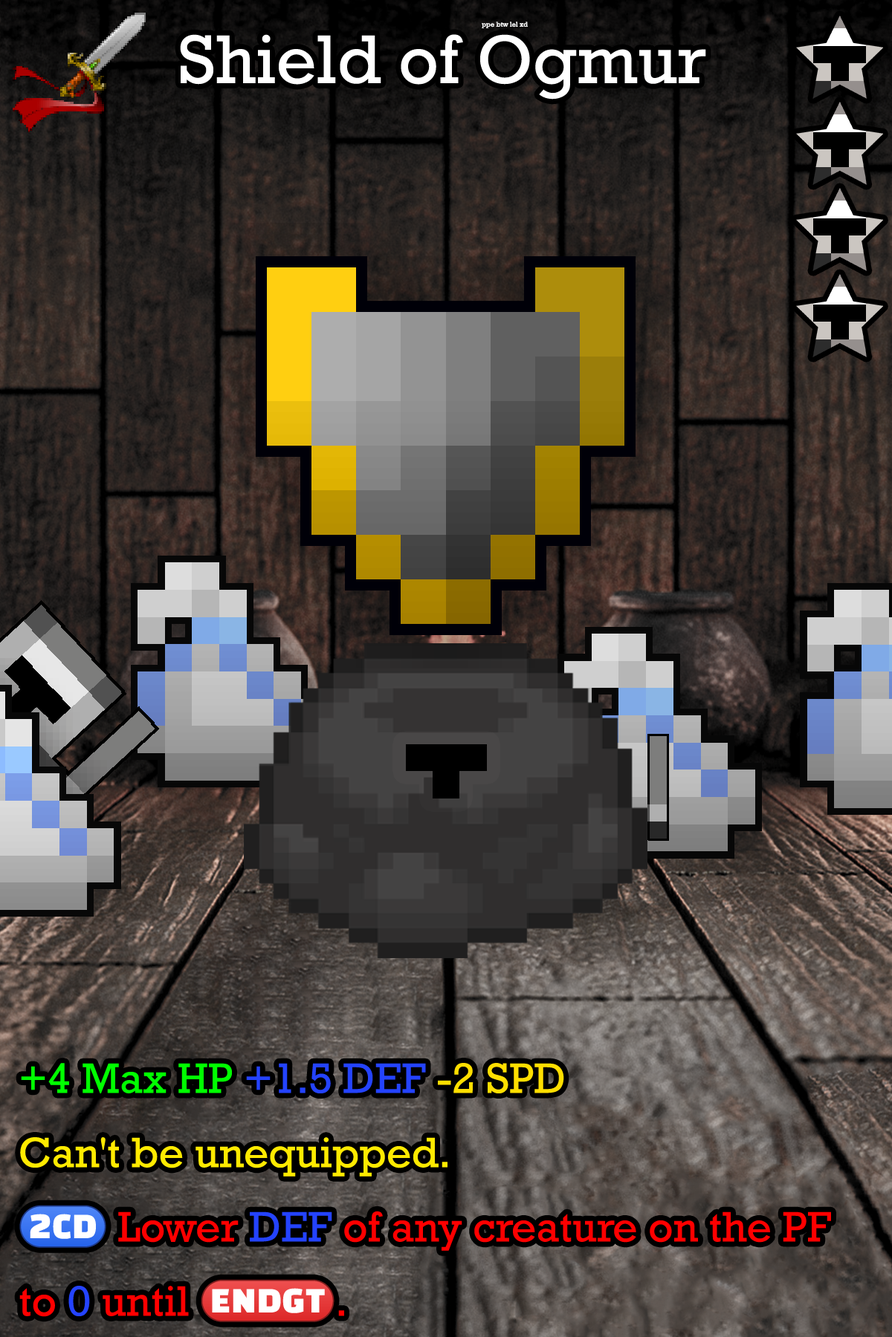
<style>
.page{position:relative;width:892px;height:1337px}
.page>*{position:absolute;margin:0}
.t1{font:11.9px "Rockwell";color:#ffffff}
.t2{font:120.4px "Rockwell";color:#ffffff}
.t3{font:74.3px/74.3px "Rockwell";color:#ff0000}
.t4{font:74.3px/74.3px "Rockwell";color:#00ff00}
.t5{font:74.3px/74.3px "Rockwell";color:#2443ff}
.t6{font:74.3px/74.3px "Rockwell";color:#ffde00}
.t7{font:74.3px/74.3px "Rockwell";color:#ffea00}
.t8{font:74.3px/74.3px "stoogedings-Regular";color:#ff0000}
</style>
<div class="page">
<p class="t1" style="left:481px;top:22px;width:47px;height:6px">ppe btw lel xd</p>
<p class="t2" style="left:180px;top:34px;width:526px;height:66px">Shield of Ogmur</p>
<p class="t3" style="left:19px;top:1063px;width:812px;height:260px"><span class="t4">+4 Max HP </span><span class="t5">+1.5 DEF </span><span class="t6">-2 SPD<br></span><span class="t7">Can't be unequipped.<br></span><span class="t8">(2CD)</span> Lower <span class="t5">DEF</span> of any creature on the PF to <span class="t5">0</span> until <span class="t8">(ENDGT)</span>.</p>
</div>
